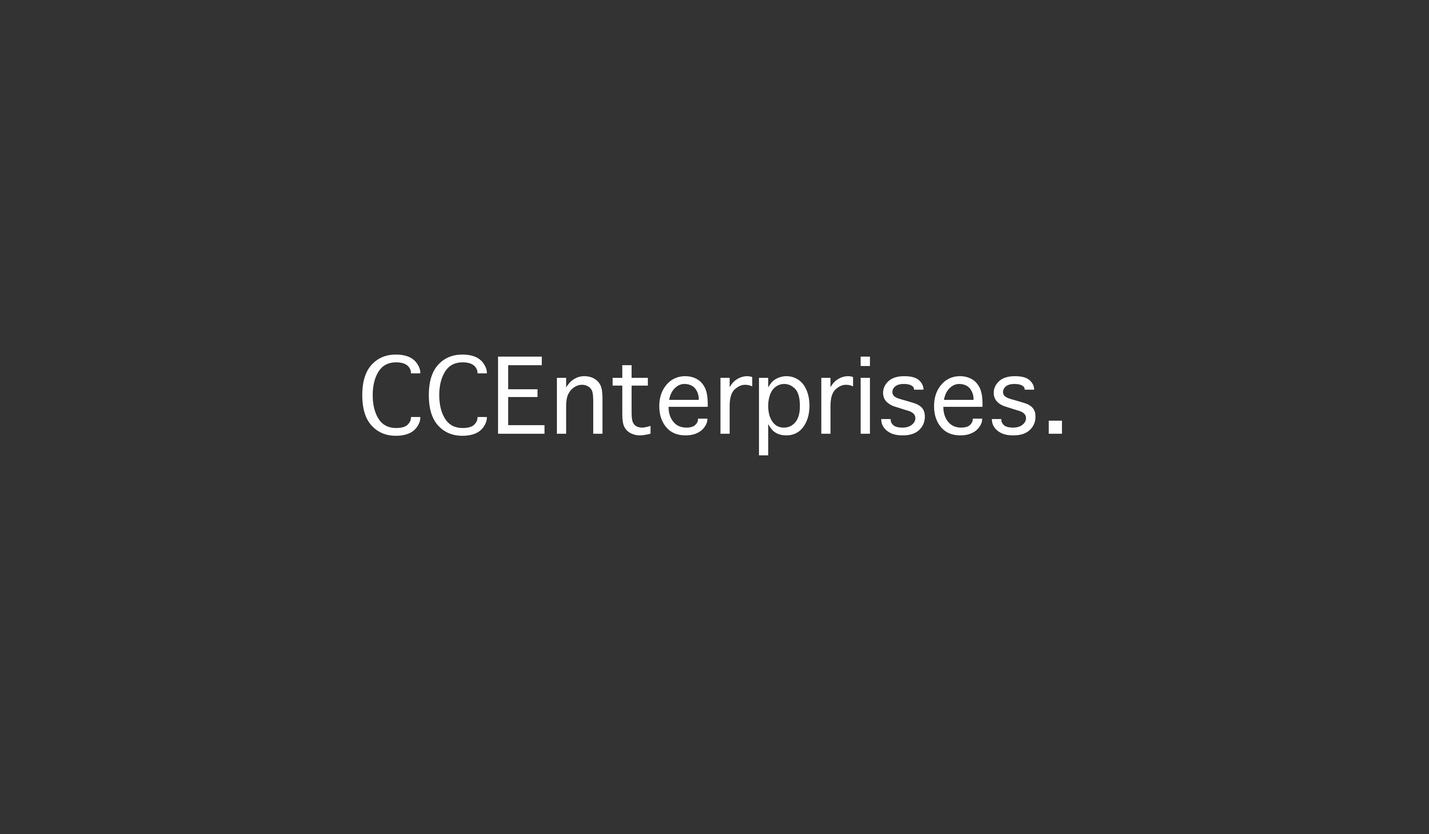
<style>
.page{position:relative;width:1429px;height:834px;background:#333333}
.page>*{position:absolute;margin:0}
.t1{font:102.1px "Geneva";color:#ffffff}
</style>
<div class="page">
<p class="t1" style="left:362px;top:355px;width:700px;height:101px">CCEnterprises.</p>
</div>
